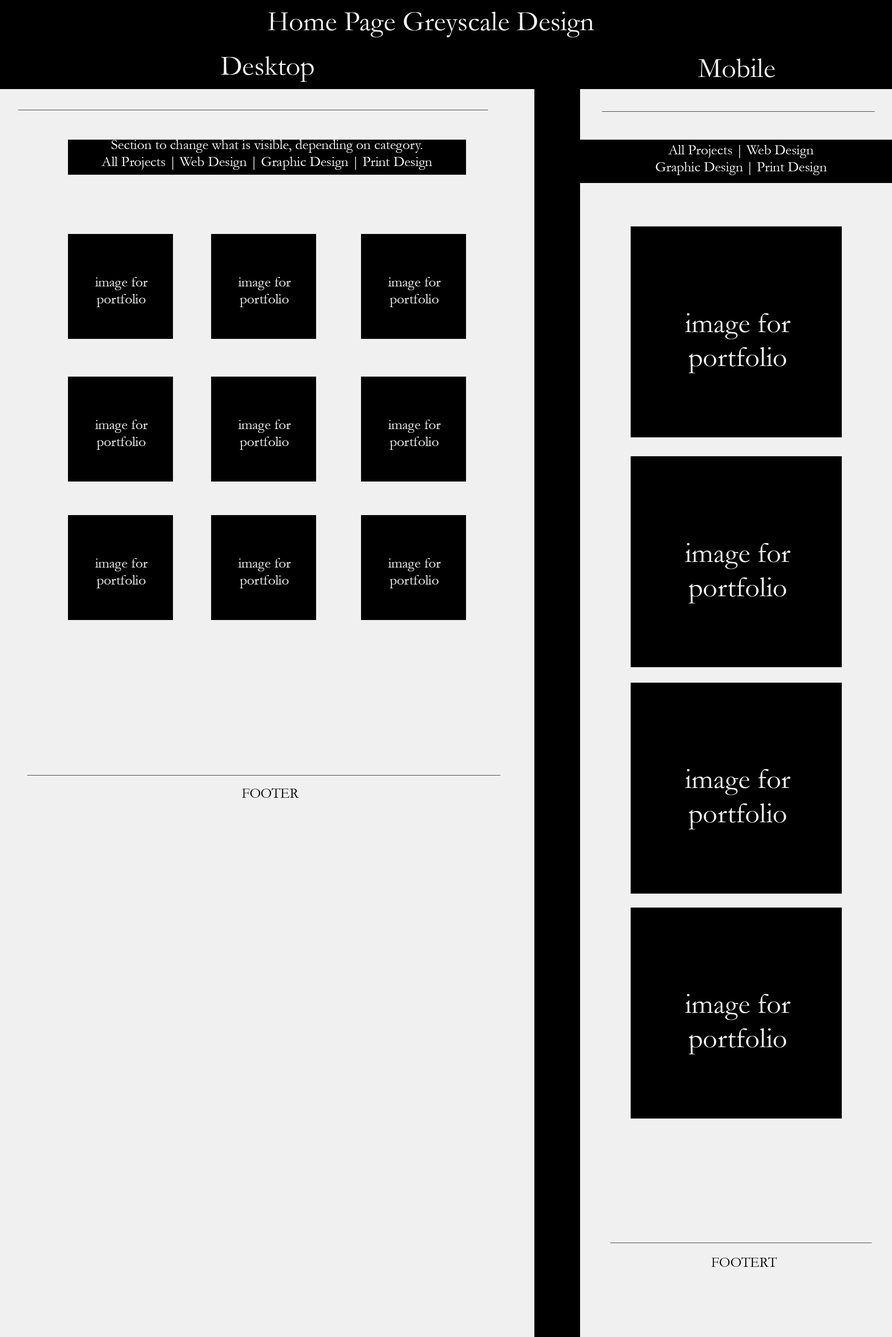
<style>
.page{position:relative;width:892px;height:1337px;background:#f0f0f0}
.page>*{position:absolute;margin:0}
.t1{font:28.3px "Garamond";color:#f0f0f0}
.t2{font:14.2px "Garamond";color:#f0f0f0}
.t3{font:28.5px "Garamond";color:#f0f0f0}
.t4{font:14.2px "Garamond";color:#000000}
</style>
<div class="page">
<p class="t1" style="left:268px;top:12px;width:326px;height:25px">Home Page Greyscale Design</p>
<p class="t1" style="left:220px;top:56px;width:94px;height:26px">Desktop</p>
<p class="t1" style="left:698px;top:59px;width:77px;height:18px">Mobile</p>
<p class="t2" style="left:101px;top:140px;width:331px;height:30px;text-align:center">Section to change what is visible, depending on category.<br>All Projects | Web Design | Graphic Design | Print Design</p>
<p class="t2" style="left:655px;top:145px;width:171px;height:30px;text-align:center">All Projects | Web Design <br>Graphic Design | Print Design</p>
<p class="t2" style="left:95px;top:277px;width:53px;height:30px;text-align:center">image for<br>portfolio</p>
<p class="t2" style="left:238px;top:277px;width:53px;height:30px;text-align:center">image for<br>portfolio</p>
<p class="t2" style="left:388px;top:277px;width:53px;height:30px;text-align:center">image for<br>portfolio</p>
<p class="t3" style="left:685px;top:313px;width:105px;height:60px;text-align:center">image for<br>portfolio</p>
<p class="t2" style="left:95px;top:420px;width:53px;height:30px;text-align:center">image for<br>portfolio</p>
<p class="t2" style="left:238px;top:420px;width:53px;height:30px;text-align:center">image for<br>portfolio</p>
<p class="t2" style="left:388px;top:420px;width:53px;height:30px;text-align:center">image for<br>portfolio</p>
<p class="t3" style="left:685px;top:543px;width:105px;height:61px;text-align:center">image for<br>portfolio</p>
<p class="t2" style="left:95px;top:558px;width:53px;height:30px;text-align:center">image for<br>portfolio</p>
<p class="t2" style="left:238px;top:558px;width:53px;height:30px;text-align:center">image for<br>portfolio</p>
<p class="t2" style="left:388px;top:558px;width:53px;height:30px;text-align:center">image for<br>portfolio</p>
<p class="t3" style="left:685px;top:769px;width:105px;height:61px;text-align:center">image for<br>portfolio</p>
<p class="t4" style="left:242px;top:788px;width:57px;height:10px">FOOTER</p>
<p class="t3" style="left:685px;top:994px;width:105px;height:61px;text-align:center">image for<br>portfolio</p>
<p class="t4" style="left:711px;top:1257px;width:65px;height:10px">FOOTERT</p>
</div>
